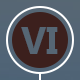
<style>
.page{position:relative;width:80px;height:80px;background:#3c201d}
.page>*{position:absolute;margin:0}
.t1{font:37.5px "SegoeUI-Bold";color:#566674}
</style>
<div class="page">
<p class="t1" style="left:21px;top:27px;width:37px;height:27px">VI</p>
</div>
